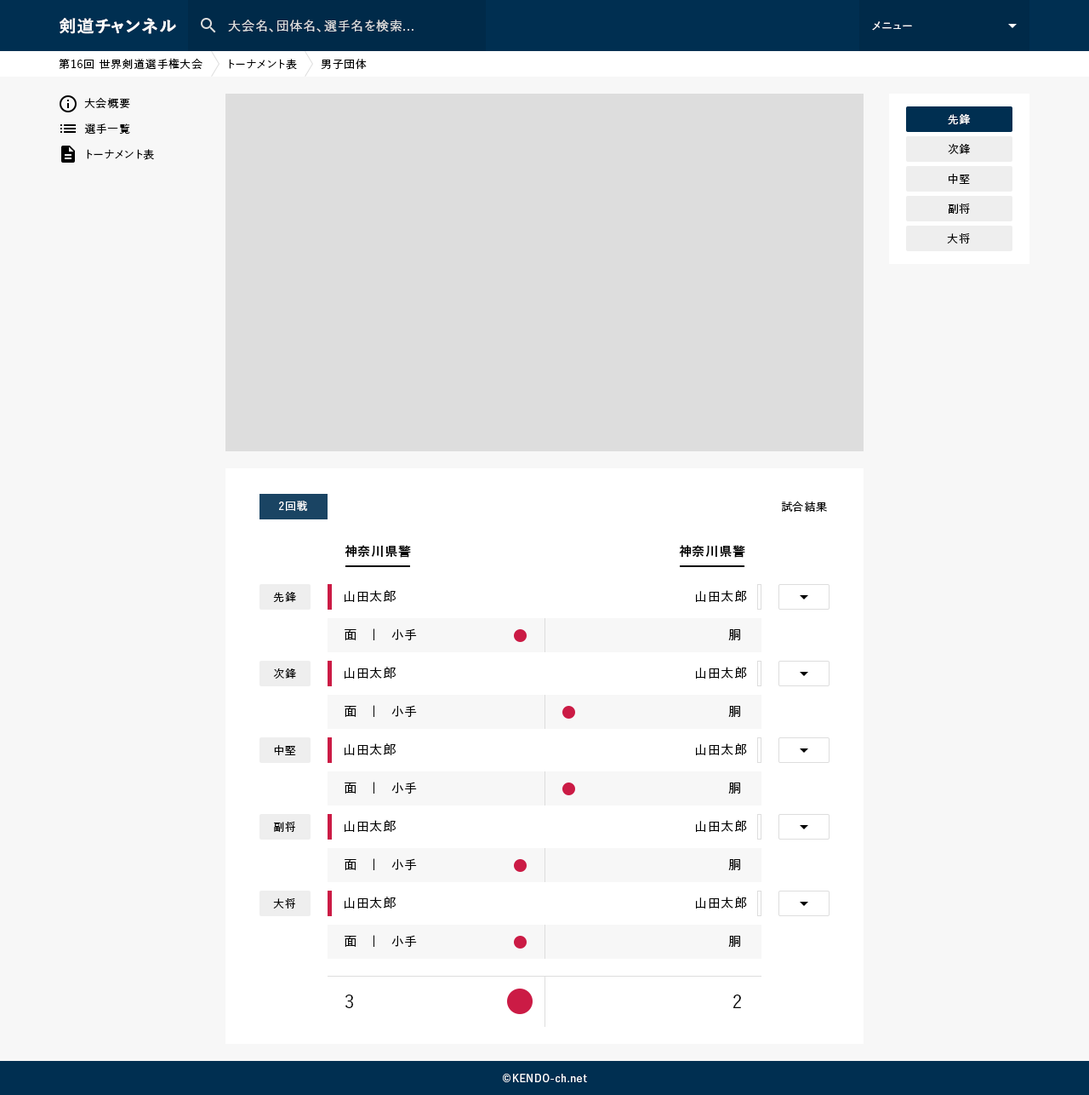
<style>
.page{position:relative;width:1089px;height:1095px;background:#f7f7f7}
.page>*{position:absolute;margin:0}
.t1{font:17px "YuGo-Bold";letter-spacing:0.05em;color:#ffffff}
.t2{font:12.8px "YuGo-Medium";letter-spacing:0.05em;color:#dddddd}
.t3{font:11.1px "YuGo-Medium";letter-spacing:0.05em;color:#ffffff}
.t4{font:11.1px "YuGo-Medium";letter-spacing:0.05em;color:#000000}
.t5{font:11.1px/25.5px "YuGo-Medium";letter-spacing:0.05em;color:#000000}
.t6{font:11.1px/29.8px "YuGo-Medium";letter-spacing:0.05em;color:#000000}
.t7{font:12.8px "YuGo-Bold";letter-spacing:0.05em;color:#000000}
.t8{font:12.8px "YuGo-Medium";letter-spacing:0.05em;color:#000000}
.t9{font:17px "YuGo-Medium";letter-spacing:0.05em;color:#000000}
.t10{font:10.2px "YuGo-Medium";letter-spacing:0.05em;color:#ffffff}
</style>
<div class="page">
<p class="t1" style="left:60px;top:18px;width:116px;height:16px">剣道チャンネル</p>
<p class="t2" style="left:228px;top:20px;width:186px;height:12px">大会名、団体名、選手名を検索...</p>
<p class="t3" style="left:872px;top:21px;width:40px;height:10px">メニュー</p>
<p class="t4" style="left:59px;top:58px;width:308px;height:12px">第16回 世界剣道選手権大会　　トーナメント表　　男子団体</p>
<p class="t5" style="left:84px;top:97px;width:70px;height:63px">大会概要<br>選手一覧<br>トーナメント表</p>
<p class="t6" style="left:947px;top:114px;width:24px;height:129px;text-align:center">先鋒<br>次鋒<br>中堅<br>副将<br>大将</p>
<p class="t3" style="left:948px;top:114px;width:23px;height:10px">先鋒</p>
<p class="t3" style="left:279px;top:500px;width:28px;height:11px">2回戦</p>
<p class="t4" style="left:781px;top:500px;width:46px;height:12px">試合結果</p>
<p class="t7" style="left:345px;top:545px;width:66px;height:12px">神奈川県警</p>
<p class="t7" style="left:679px;top:545px;width:67px;height:12px">神奈川県警</p>
<p class="t4" style="left:273px;top:592px;width:23px;height:10px">先鋒</p>
<p class="t8" style="left:345px;top:590px;width:51px;height:12px">山田太郎</p>
<p class="t8" style="left:696px;top:590px;width:51px;height:12px">山田太郎</p>
<p class="t8" style="left:345px;top:628px;width:72px;height:12px">面　｜　小手</p>
<p class="t8" style="left:729px;top:629px;width:11px;height:11px">胴</p>
<p class="t4" style="left:273px;top:668px;width:23px;height:10px">次鋒</p>
<p class="t8" style="left:345px;top:666px;width:51px;height:12px">山田太郎</p>
<p class="t8" style="left:696px;top:666px;width:51px;height:12px">山田太郎</p>
<p class="t8" style="left:345px;top:705px;width:72px;height:12px">面　｜　小手</p>
<p class="t8" style="left:729px;top:706px;width:11px;height:11px">胴</p>
<p class="t4" style="left:274px;top:745px;width:22px;height:10px">中堅</p>
<p class="t8" style="left:345px;top:743px;width:51px;height:12px">山田太郎</p>
<p class="t8" style="left:696px;top:743px;width:51px;height:12px">山田太郎</p>
<p class="t8" style="left:345px;top:781px;width:72px;height:12px">面　｜　小手</p>
<p class="t8" style="left:729px;top:782px;width:11px;height:11px">胴</p>
<p class="t4" style="left:274px;top:821px;width:21px;height:11px">副将</p>
<p class="t8" style="left:345px;top:820px;width:51px;height:12px">山田太郎</p>
<p class="t8" style="left:696px;top:820px;width:51px;height:12px">山田太郎</p>
<p class="t8" style="left:345px;top:858px;width:72px;height:12px">面　｜　小手</p>
<p class="t8" style="left:729px;top:859px;width:11px;height:11px">胴</p>
<p class="t4" style="left:273px;top:898px;width:22px;height:10px">大将</p>
<p class="t8" style="left:345px;top:896px;width:51px;height:12px">山田太郎</p>
<p class="t8" style="left:696px;top:896px;width:51px;height:12px">山田太郎</p>
<p class="t8" style="left:345px;top:935px;width:72px;height:11px">面　｜　小手</p>
<p class="t8" style="left:729px;top:935px;width:11px;height:11px">胴</p>
<p class="t9" style="left:345px;top:994px;width:8px;height:14px">３</p>
<p class="t9" style="left:734px;top:994px;width:7px;height:14px">2</p>
<p class="t10" style="left:503px;top:1073px;width:84px;height:9px">©KENDO-ch.net</p>
</div>
